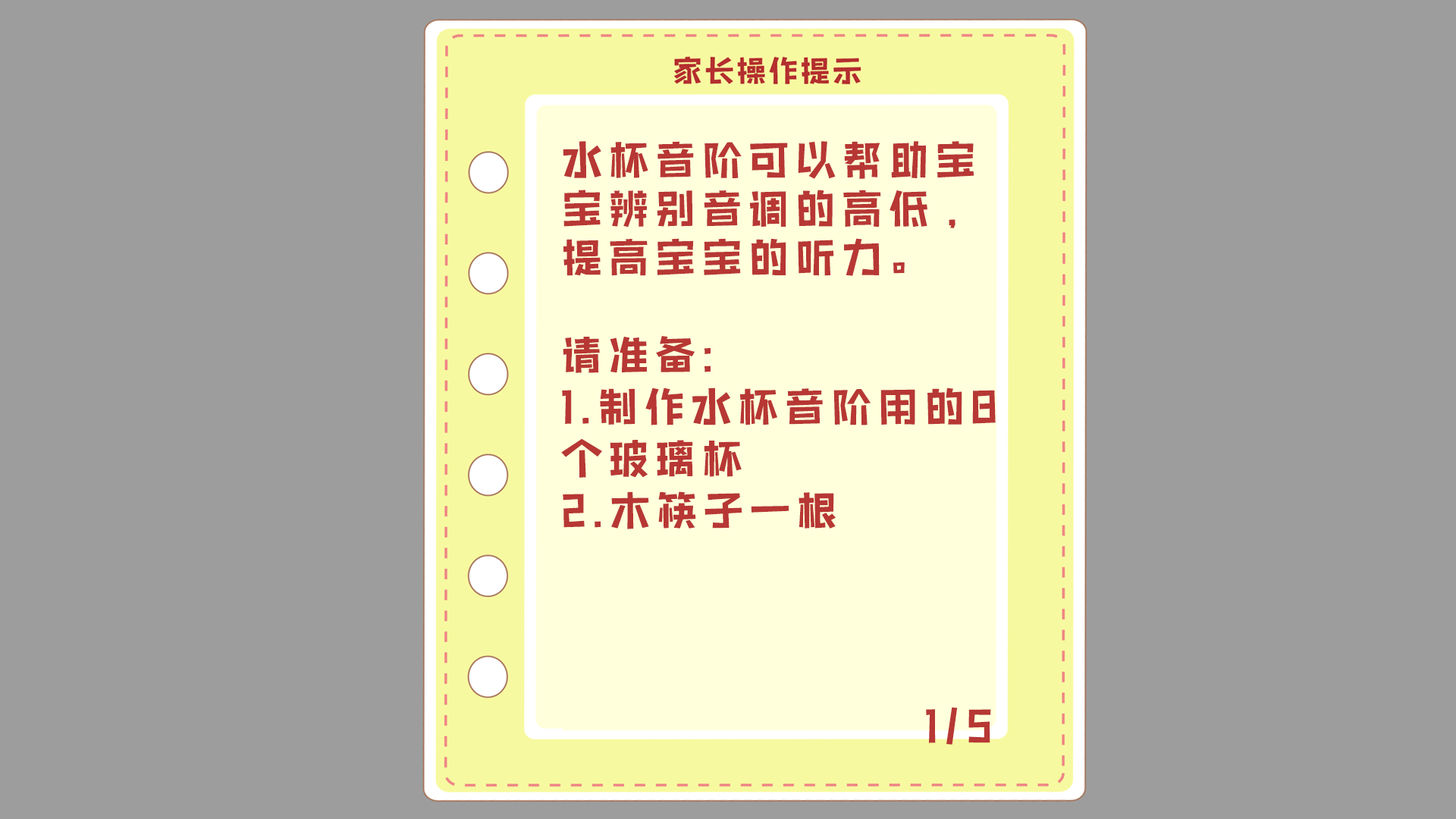
<style>
.page{position:relative;width:1456px;height:819px;background:#9d9d9d}
.page>*{position:absolute;margin:0}
.t1{font:40.9px/51.8px "BenmoJianzi";letter-spacing:0.14em;color:#b73734}
.t2{font:40.9px/48.8px "BenmoJianzi";letter-spacing:0.14em;color:#b73734}
.t3{font:40.9px "BenmoJianzi";letter-spacing:0.14em;color:#b73734}
</style>
<div class="page">
<p class="t1" style="left:561px;top:141px;width:435px;height:388px"><span class="t2">水杯音阶可以帮助宝宝辨别音调的高低，提高宝宝的听力。<br>　　<br></span>请准备:<br>1.制作水杯音阶用的8个玻璃杯<br>2.木筷子一根</p>
<p class="t3" style="left:926px;top:708px;width:65px;height:37px">1/5</p>
</div>
